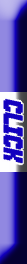
<style>
.page{position:relative;width:27px;height:264px}
.page>*{position:absolute;margin:0}
.t1{font:20.8px "Abduction2000";color:#1301bf}
</style>
<div class="page">
<p class="t1" style="left:3px;top:98px;width:20px;height:66px;rotate:90deg">click</p>
</div>
